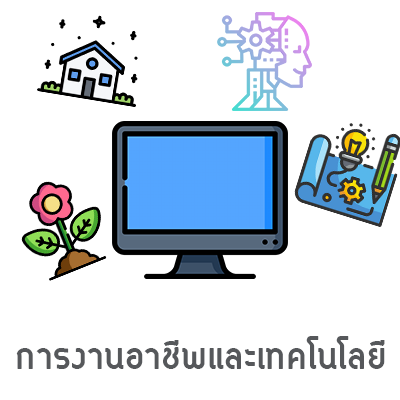
<style>
.page{position:relative;width:400px;height:400px;background:#ffffff}
.page>*{position:absolute;margin:0}
.t1{font:50px "Circular-Bold";color:#56585b}
</style>
<div class="page">
<p class="t1" style="left:16px;top:336px;width:369px;height:33px">การงานอาชีพและเทคโนโลยี</p>
</div>
